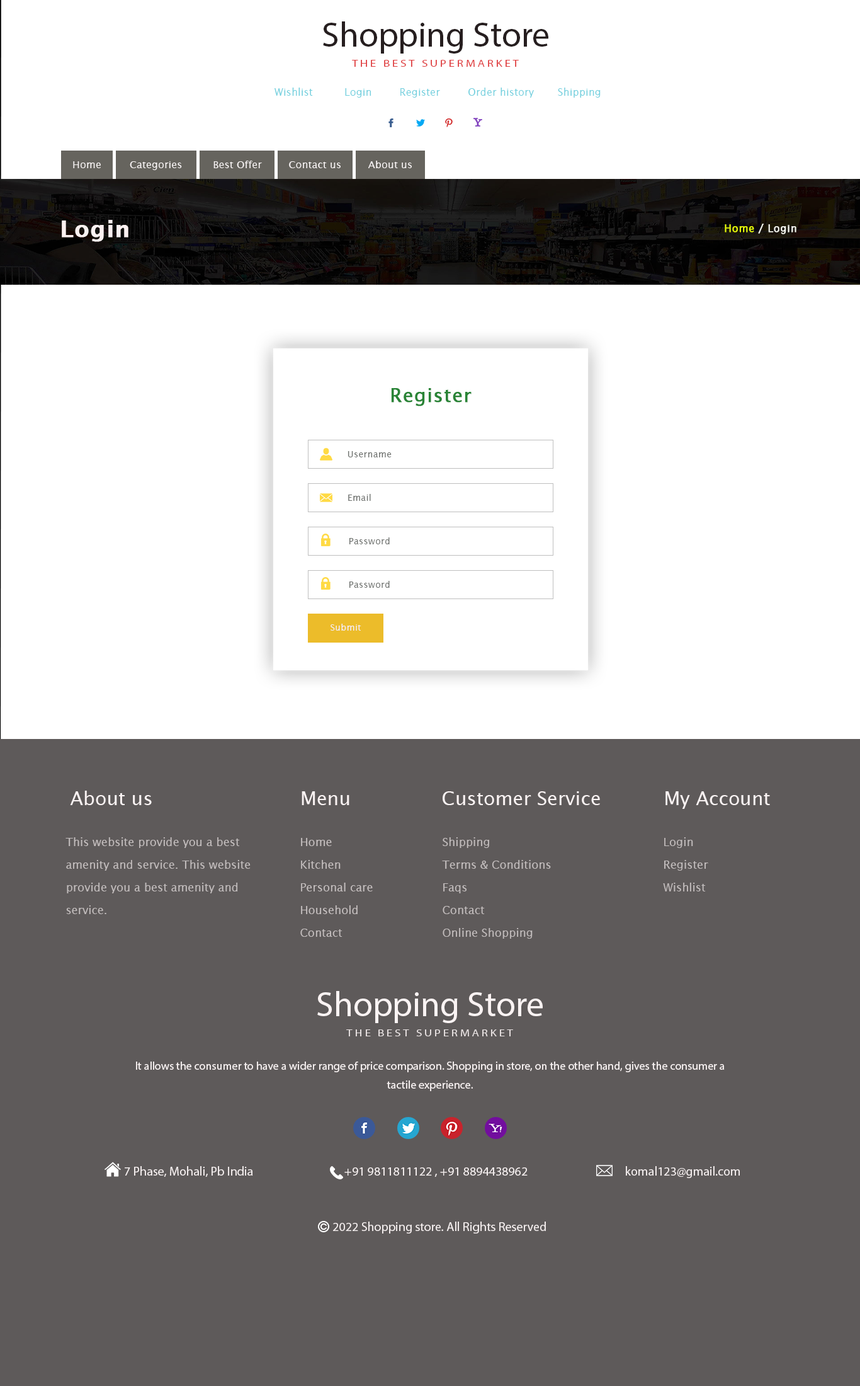
<style>
.page{position:relative;width:860px;height:1386px;background:#5e5a5a}
.page>*{position:absolute;margin:0}
.t1{font:35.2px "MyriadPro-Regular";color:#261e1f}
.t2{font:10.3px "MyriadPro-Regular";letter-spacing:0.2em;color:#e04143;text-transform:uppercase;scale:1.15 1}
.t3{font:10.3px "LucidaSans";color:#74d1df}
.t4{font:9.7px "LucidaSans";color:#f9f5f5;scale:1.05 1}
.t5{font:22.7px "LucidaSans-Demi";letter-spacing:0.025em;color:#fcf1f1;font-weight:bold}
.t6{font:10.1px "LucidaSans";letter-spacing:0.025em;color:#f4f5ed;font-weight:bold}
.t7{font:10.1px "LucidaSans";letter-spacing:0.025em;color:#e5f90a;font-weight:bold}
.t8{font:18.9px "LucidaSans";letter-spacing:0.025em;color:#298436;font-weight:bold}
.t9{font:8.8px "LucidaSans";letter-spacing:0.025em;color:#707370}
.t10{font:8.8px "LucidaSans";letter-spacing:0.025em;color:#f4eced}
.t11{font:18.9px "LucidaSans";color:#faf3f3}
.t12{font:18.9px "LucidaSans";letter-spacing:0.025em;color:#faf3f3}
.t13{font:11.3px/22.7px "LucidaSans";color:#c2bdbd}
.t14{font:11.3px/22.7px "LucidaSans";color:#c4bebe}
.t15{font:35.2px "MyriadPro-Regular";color:#faf3f3}
.t16{font:10.3px "MyriadPro-Regular";letter-spacing:0.2em;color:#f6f0f0;text-transform:uppercase;scale:1.15 1}
.t17{font:11.3px/18.9px "MyriadPro-Regular";color:#f6f0f0}
.t18{font:12.6px "MyriadPro-Regular";color:#f6f0f0}
</style>
<div class="page">
<p class="t1" style="left:323px;top:21px;width:226px;height:33px">Shopping Store</p>
<p class="t2" style="left:352px;top:60px;width:167px;height:7px">The Best Supermarket</p>
<p class="t3" style="left:275px;top:88px;width:38px;height:8px">Wishlist</p>
<p class="t3" style="left:345px;top:88px;width:27px;height:10px">Login</p>
<p class="t3" style="left:401px;top:88px;width:39px;height:10px">Register</p>
<p class="t3" style="left:469px;top:88px;width:65px;height:10px">Order history</p>
<p class="t3" style="left:558px;top:88px;width:43px;height:10px">Shipping</p>
<p class="t4" style="left:73px;top:161px;width:28px;height:7px">Home</p>
<p class="t4" style="left:130px;top:161px;width:52px;height:9px">Categories</p>
<p class="t4" style="left:214px;top:161px;width:48px;height:7px">Best Offer</p>
<p class="t4" style="left:289px;top:161px;width:52px;height:7px">Contact us</p>
<p class="t4" style="left:368px;top:161px;width:44px;height:7px">About us</p>
<p class="t5" style="left:62px;top:220px;width:67px;height:22px">Login</p>
<p class="t6" style="left:725px;top:224px;width:72px;height:10px"><span class="t7">Home </span>/ Login</p>
<p class="t8" style="left:391px;top:388px;width:81px;height:18px">Register</p>
<p class="t9" style="left:348px;top:451px;width:44px;height:6px">Username</p>
<p class="t9" style="left:348px;top:494px;width:23px;height:7px">Email</p>
<p class="t9" style="left:349px;top:537px;width:41px;height:7px">Password</p>
<p class="t9" style="left:349px;top:581px;width:41px;height:7px">Password</p>
<p class="t10" style="left:331px;top:624px;width:31px;height:7px">Submit</p>
<p class="t11" style="left:70px;top:791px;width:82px;height:14px">About us</p>
<p class="t11" style="left:302px;top:791px;width:48px;height:14px">Menu</p>
<p class="t11" style="left:443px;top:791px;width:157px;height:14px"><span class="t12">C</span>ustomer Service</p>
<p class="t11" style="left:666px;top:791px;width:104px;height:18px">My Account</p>
<p class="t13" style="left:66px;top:837px;width:185px;height:77px">This website provide you a best amenity and service. This website provide you a best amenity and service.</p>
<p class="t14" style="left:300px;top:838px;width:73px;height:99px">Home       Kitchen     Personal care       Household        Contact</p>
<p class="t13" style="left:442px;top:837px;width:109px;height:102px">Shipping  Terms &amp; Conditions Faqs    Contact    Online Shopping</p>
<p class="t13" style="left:663px;top:837px;width:46px;height:54px">Login  Register  Wishlist</p>
<p class="t15" style="left:317px;top:991px;width:226px;height:32px">Shopping Store</p>
<p class="t16" style="left:346px;top:1029px;width:167px;height:7px;opacity:0.89">The Best Supermarket</p>
<p class="t17" style="left:136px;top:1061px;width:589px;height:30px;text-align:center">It allows the consumer to have a wider range of price comparison. Shopping in store, on the other hand, gives the consumer a tactile experience.</p>
<p class="t18" style="left:125px;top:1166px;width:128px;height:11px">7 Phase, Mohali, Pb India</p>
<p class="t18" style="left:345px;top:1167px;width:183px;height:10px">+91 9811811122 , +91 8894438962</p>
<p class="t18" style="left:626px;top:1166px;width:114px;height:12px">komal123@gmail.com</p>
<p class="t18" style="left:333px;top:1221px;width:213px;height:12px">2022 Shopping store. All Rights Reserved</p>
</div>
